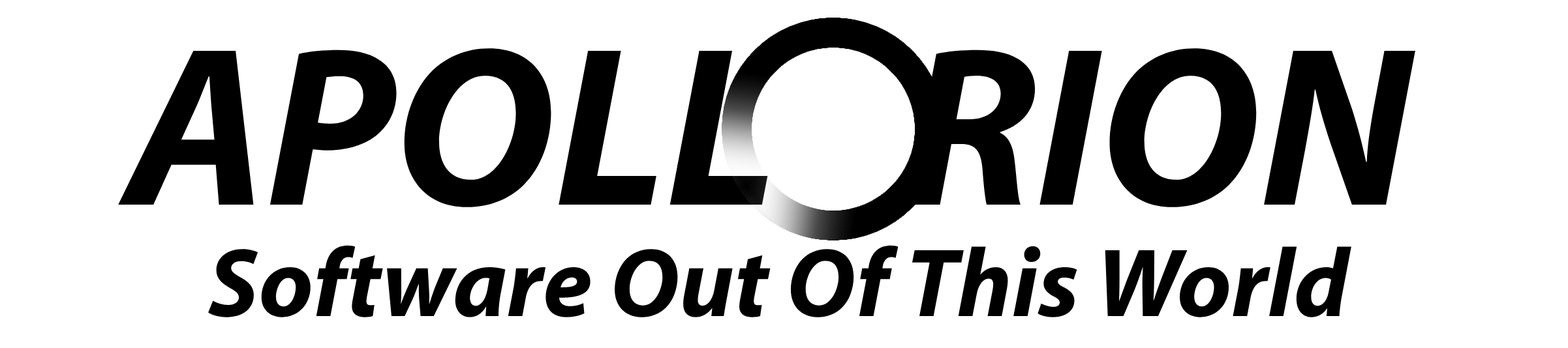
<style>
.page{position:relative;width:1568px;height:348px;background:#ffffff}
.page>*{position:absolute;margin:0}
.t1{font:228.4px "Myriad-BoldItalic";color:#000000}
.t2{font:97.9px "Myriad-BoldItalic";color:#000000}
</style>
<div class="page">
<p class="t1" style="left:118px;top:48px;width:1297px;height:160px">APOLL   RION</p>
<p class="t2" style="left:208px;top:245px;width:1143px;height:73px">Software Out Of This World</p>
</div>
